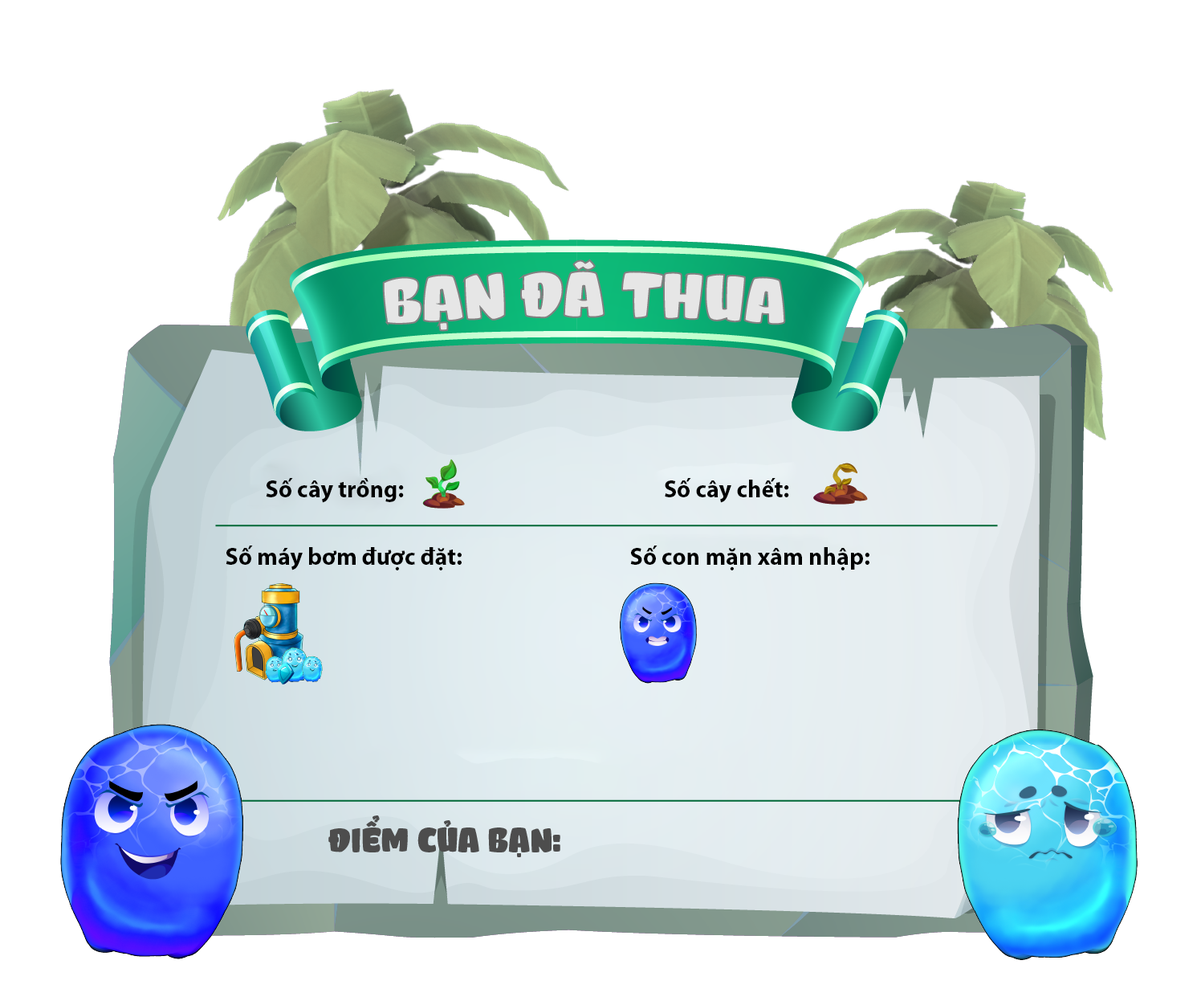
<style>
.page{position:relative;width:1201px;height:993px;background:#ffffff}
.page>*{position:absolute;margin:0}
.t1{font:24.1px "MyriadPro-Bold";color:#000000}
</style>
<div class="page">
<p class="t1" style="left:266px;top:478px;width:138px;height:25px">Số cây trồng:</p>
<p class="t1" style="left:665px;top:478px;width:124px;height:25px">Số cây chết:</p>
<p class="t1" style="left:226px;top:545px;width:236px;height:25px">Số máy bơm được đặt:</p>
<p class="t1" style="left:630px;top:545px;width:240px;height:25px">Số con mặn xâm nhập:</p>
</div>
